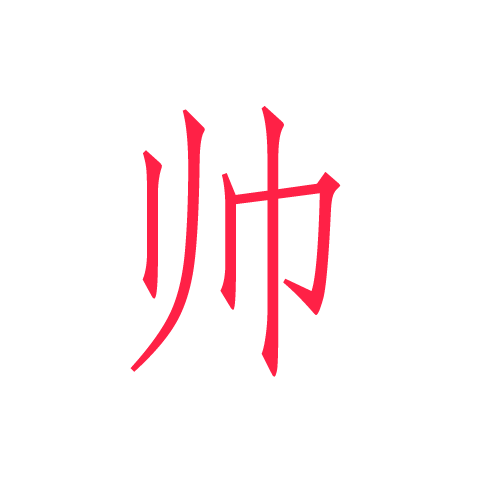
<style>
.page{position:relative;width:480px;height:480px;background:#ffffff}
.page>*{position:absolute;margin:0}
.t1{font:288px "STFangsong";color:#ff2146}
</style>
<div class="page">
<p class="t1" style="left:130px;top:106px;width:211px;height:271px">帅</p>
</div>
